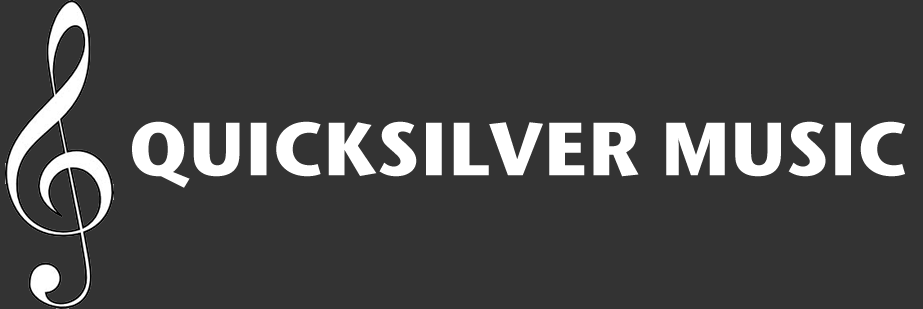
<style>
.page{position:relative;width:923px;height:309px;background:#333333}
.page>*{position:absolute;margin:0}
.t1{font:75px "StoneSansITC-Bold";color:#ffffff}
</style>
<div class="page">
<p class="t1" style="left:132px;top:121px;width:773px;height:67px">QUICKSILVER MUSIC</p>
</div>
